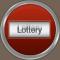
<style>
.page{position:relative;width:60px;height:60px}
.page>*{position:absolute;margin:0}
.t1{font:8px "HelveticaNeue";color:#4a4d54}
</style>
<div class="page">
<p class="t1" style="left:17px;top:27px;width:25px;height:8px;opacity:0.8">Lottery</p>
</div>
